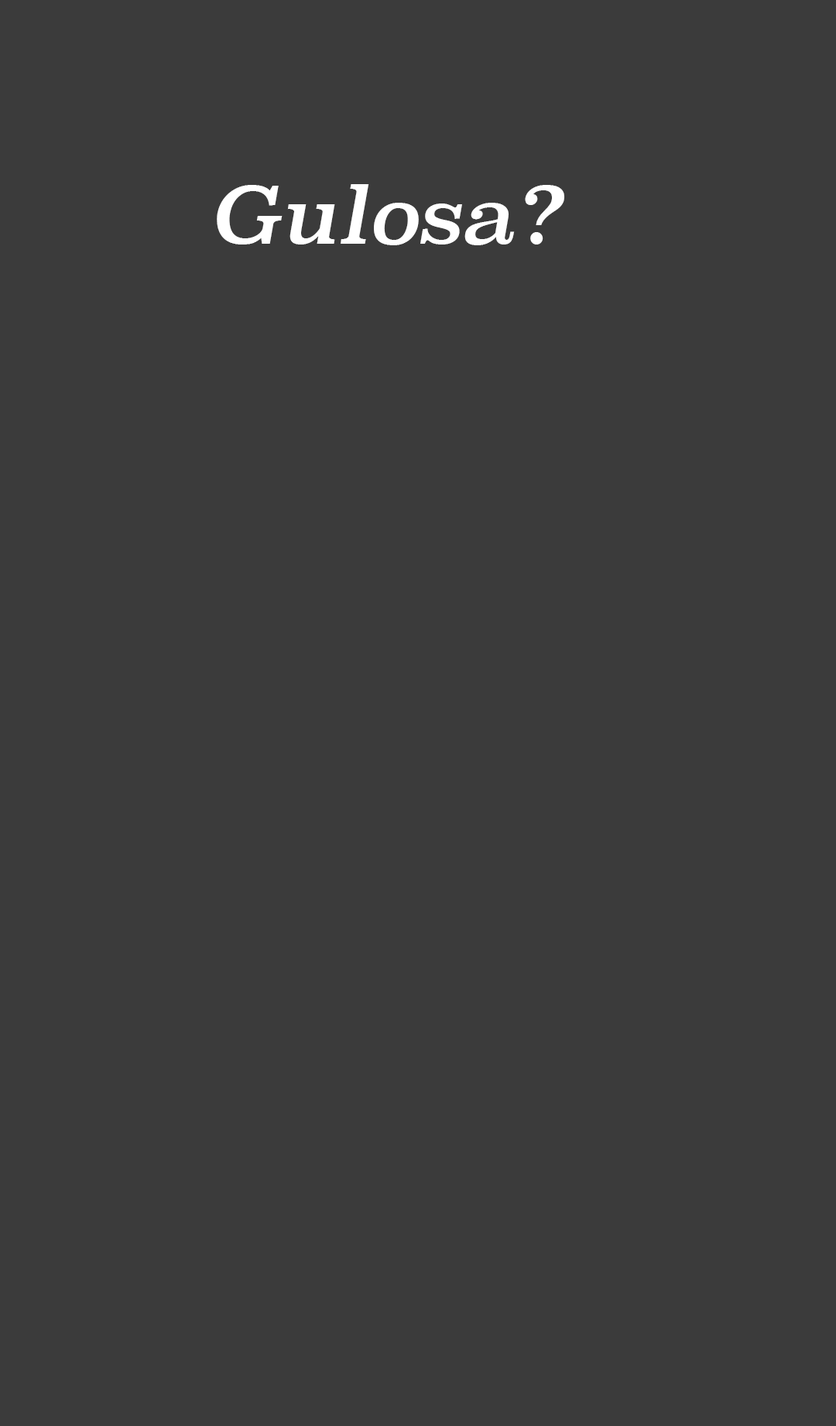
<style>
.page{position:relative;width:836px;height:1426px;background:#3b3b3b}
.page>*{position:absolute;margin:0}
.t1{font:77.4px "Superclarendon-Italic";color:#ffffff}
</style>
<div class="page">
<p class="t1" style="left:217px;top:184px;width:347px;height:61px">Gulosa?</p>
</div>
